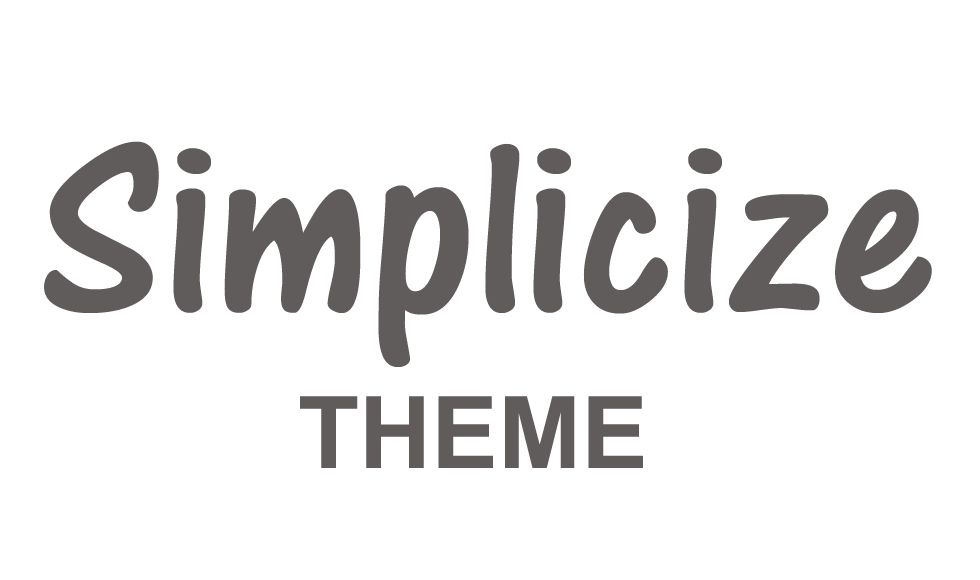
<style>
.page{position:relative;width:980px;height:580px;background:#ffffff}
.page>*{position:absolute;margin:0}
.t1{font:260px "ARCENA";color:#605c5c}
.t2{font:100px "Arial-BoldMT";color:#605c5c}
</style>
<div class="page">
<p class="t1" style="left:44px;top:141px;width:888px;height:226px">Simplicize</p>
<p class="t2" style="left:300px;top:396px;width:343px;height:72px">THEME</p>
</div>
